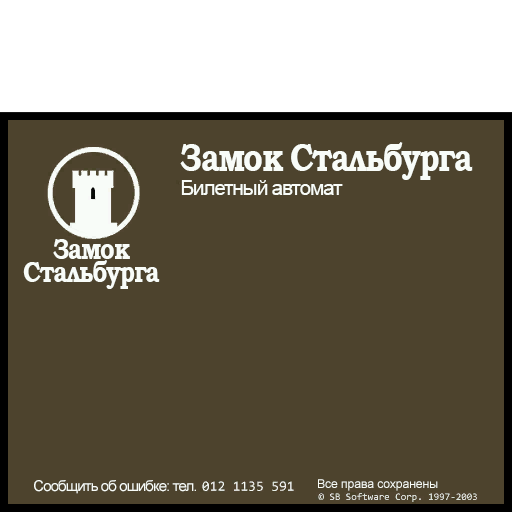
<style>
.page{position:relative;width:512px;height:512px;background:#4d432d}
.page>*{position:absolute;margin:0}
.t1{font:40px "BookmanOldStyle-Bold";letter-spacing:-0.06em;color:#f8fcf8;scale:0.81 1}
.t2{font:21px "ArialMT";letter-spacing:-0.06em;color:#f8fcf8}
.t3{font:30px/23px "BookmanOldStyle-Bold";letter-spacing:-0.06em;color:#f8fcf8;scale:0.81 1}
.t4{font:15px "ArialMT";letter-spacing:-0.06em;color:#f8fcf8}
.t5{font:12px "ArialMT";color:#f8fcf8}
</style>
<div class="page">
<p class="t1" style="left:180px;top:142px;width:293px;height:38px">Замок Стальбурга</p>
<p class="t2" style="left:181px;top:180px;width:162px;height:15px">Билетный автомат</p>
<p class="t3" style="left:23px;top:239px;width:137px;height:50px;text-align:center">Замок<br>Стальбурга</p>
<p class="t4" style="left:34px;top:480px;width:162px;height:14px">Сообщить об ошибке: тел.</p>
<p class="t5" style="left:318px;top:479px;width:120px;height:12px">Все права сохранены</p>
</div>
